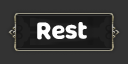
<style>
.page{position:relative;width:128px;height:64px;background:#333333}
.page>*{position:absolute;margin:0}
.t1{font:24px "MilkyNiceClean";color:#fdfdfd}
</style>
<div class="page">
<p class="t1" style="left:37px;top:22px;width:50px;height:18px">Rest</p>
</div>
